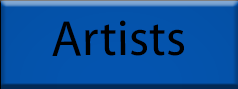
<style>
.page{position:relative;width:238px;height:89px}
.page>*{position:absolute;margin:0}
.t1{font:51px "MyriadPro-Regular";color:#000000}
</style>
<div class="page">
<p class="t1" style="left:52px;top:20px;width:132px;height:36px">Artists</p>
</div>
